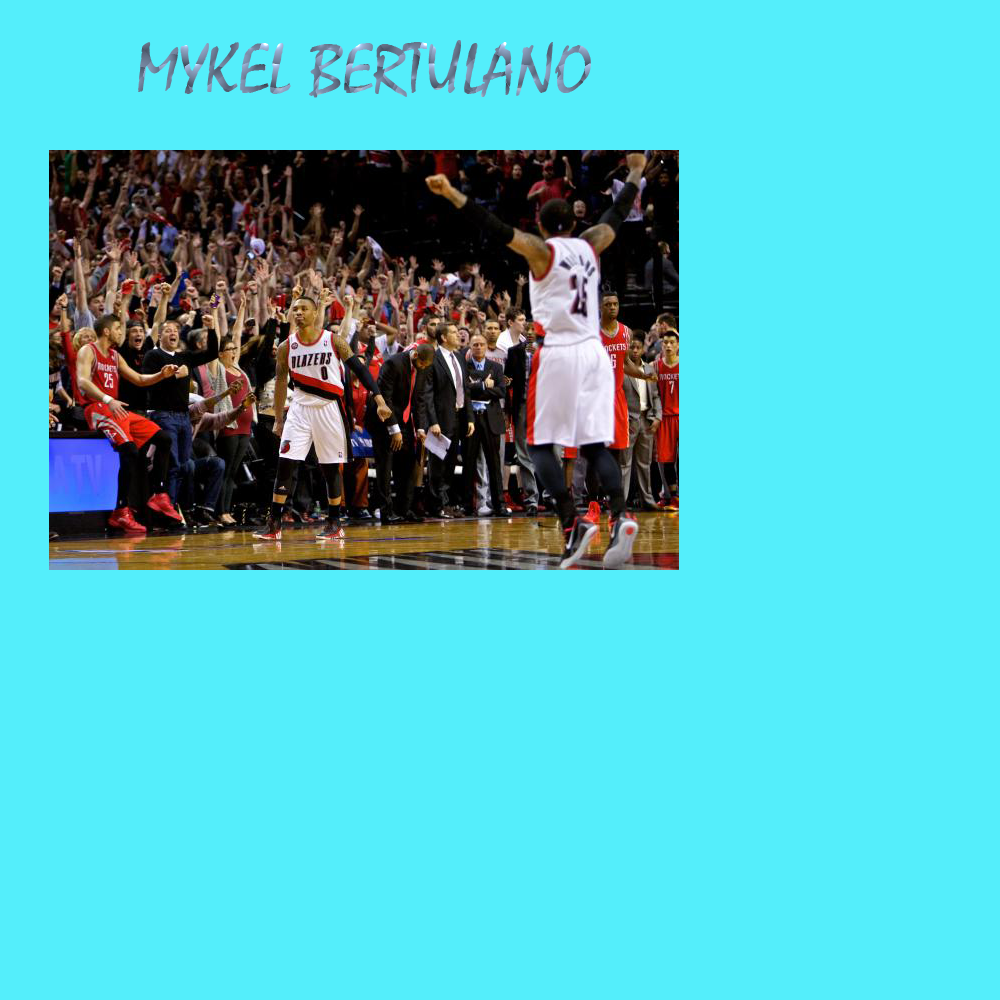
<style>
.page{position:relative;width:1000px;height:1000px;background:#54eefb}
.page>*{position:absolute;margin:0}
.t1{font:72px "Mistral"}
</style>
<div class="page">
<p class="t1" style="left:138px;top:40px;width:453px;height:58px">MYKEL BERTULANO</p>
</div>
